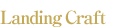
<style>
.page{position:relative;width:133px;height:27px;background:#ffffff}
.page>*{position:absolute;margin:0}
.t1{font:18px "RyuminPro-ExBold";letter-spacing:-0.08em;color:#c4a956}
</style>
<div class="page">
<p class="t1" style="left:0px;top:10px;width:106px;height:17px">Landing Craft</p>
</div>
